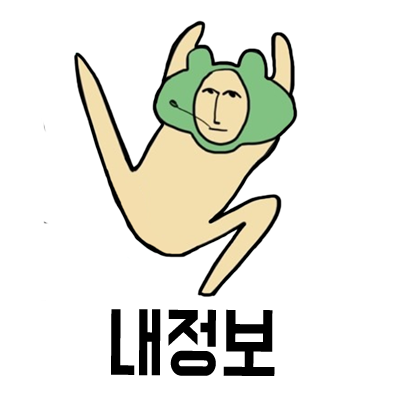
<style>
.page{position:relative;width:400px;height:400px;background:#ffffff}
.page>*{position:absolute;margin:0}
.t1{font:69.8px "BMDoHyeon";color:#000000;scale:0.84 1}
</style>
<div class="page">
<p class="t1" style="left:111px;top:309px;width:164px;height:67px">내정보</p>
</div>
